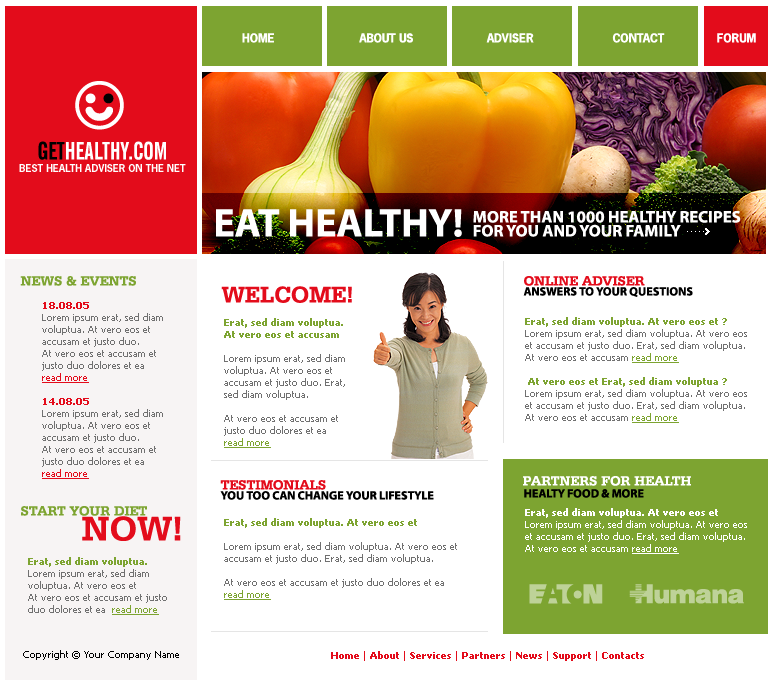
<style>
.page{position:relative;width:775px;height:680px;background:#ffffff}
.page>*{position:absolute;margin:0}
.t1{font:11.5px "NewsGothicStd-Bold";color:#ffffff;text-transform:uppercase}
.t2{font:24px "NewsGothicBT-BoldExtraCondensed";color:#ffffff}
.t3{font:24px "NewsGothicBT-BoldExtraCondensed";color:#000000}
.t4{font:10px "NewsGothicStd-Bold";color:#ffffff;text-transform:uppercase}
.t5{font:40.1px "MyriadPro-Bold";color:#ffffff;text-transform:uppercase}
.t6{font:16.7px "MyriadPro-Bold";color:#ffffff;text-transform:uppercase}
.t7{font:14px "SerifaBT-Bold";color:#7da431;text-transform:uppercase}
.t8{font:14px "SerifaBT-Bold";color:#e30c1b;text-transform:uppercase}
.t9{font:24px "SerifaBT-Bold";color:#e30c1b;text-transform:uppercase}
.t10{font:12px "MyriadPro-Bold";color:#000000;text-transform:uppercase}
.t11{font:10px "Tahoma";color:#707070}
.t12{font:10px "Tahoma-Bold";color:#e30c1b}
.t13{font:10px "Tahoma";color:#e30c1b;text-decoration:underline}
.t14{font:10px "Tahoma-Bold";color:#7da431}
.t15{font:10px "Tahoma";color:#7da431;text-decoration:underline}
.t16{font:14px "SerifaBT-Bold";color:#ffffff;text-transform:uppercase}
.t17{font:10px "Tahoma";color:#ffffff}
.t18{font:10px "Tahoma-Bold";color:#ffffff}
.t19{font:10px "Tahoma";color:#ffffff;text-decoration:underline}
.t20{font:36px "SerifaBT-Bold";color:#e30c1b;text-transform:uppercase}
.t21{font:24px "CORPartIISample";color:#bed298;text-transform:uppercase}
.t22{font:10px "Tahoma";color:#000000}
.t23{font:10px "Tahoma";color:#e30c1b}
</style>
<div class="page">
<p class="t1" style="left:242px;top:33px;width:32px;height:10px">HOME</p>
<p class="t1" style="left:359px;top:33px;width:54px;height:10px">ABOUT US</p>
<p class="t1" style="left:486px;top:33px;width:48px;height:10px">ADVISER</p>
<p class="t1" style="left:612px;top:33px;width:53px;height:10px">CONTACT</p>
<p class="t1" style="left:717px;top:33px;width:39px;height:10px">FORUM</p>
<p class="t2" style="left:38px;top:141px;width:128px;height:19px"><span class="t3">GET</span>HEALTHY.COM</p>
<p class="t4" style="left:19px;top:164px;width:167px;height:8px">BEST HEALTH ADVISER ON THE NET</p>
<p class="t5" style="left:216px;top:209px;width:246px;height:28px">EAT HEALTHY!</p>
<p class="t6" style="left:473px;top:211px;width:268px;height:12px">MORE THAN 1000 HEALTHY RECIPES</p>
<p class="t6" style="left:473px;top:224px;width:208px;height:13px">FOR YOU AND YOUR FAMILY</p>
<p class="t7" style="left:20px;top:276px;width:116px;height:10px">NEWS &amp; EVENTS</p>
<p class="t8" style="left:524px;top:276px;width:121px;height:10px">ONLINE ADVISER</p>
<p class="t9" style="left:221px;top:286px;width:131px;height:17px">WELCOME!</p>
<p class="t10" style="left:523px;top:287px;width:170px;height:10px">ANSWERS TO YOUR QUESTIONS</p>
<p class="t11" style="left:42px;top:302px;width:121px;height:177px"><span class="t12">18.08.05<br></span>Lorem ipsum erat, sed diam voluptua. At vero eos et accusam et justo duo. <br>At vero eos et accusam et justo duo dolores et ea  <span class="t13">read more<br><br></span><span class="t12">14.08.05<br></span>Lorem ipsum erat, sed diam voluptua. At vero eos et accusam et justo duo. <br>At vero eos et accusam et justo duo dolores et ea  <span class="t13">read more</span></p>
<p class="t11" style="left:224px;top:318px;width:121px;height:130px"><span class="t14">Erat, sed diam voluptua. At vero eos et accusam <br><br></span>Lorem ipsum erat, sed diam voluptua. At vero eos et accusam et justo duo. Erat, sed diam voluptua. <br><br>At vero eos et accusam et justo duo dolores et ea  <span class="t15">read more</span></p>
<p class="t11" style="left:525px;top:317px;width:222px;height:106px"><span class="t14">Erat, sed diam voluptua. At vero eos et ?<br></span>Lorem ipsum erat, sed diam voluptua. At vero eos et accusam et justo duo. Erat, sed diam voluptua.<br>At vero eos et accusam <span class="t15">read more<br><br></span><span class="t14"> At vero eos et Erat, sed diam voluptua ?<br></span>Lorem ipsum erat, sed diam voluptua. At vero eos et accusam et justo duo. Erat, sed diam voluptua.<br>At vero eos et accusam <span class="t15">read more</span></p>
<p class="t8" style="left:220px;top:480px;width:106px;height:10px">TESTIMONIALS</p>
<p class="t16" style="left:523px;top:476px;width:168px;height:10px">partners for health</p>
<p class="t10" style="left:220px;top:491px;width:214px;height:9px">YOU TOO CAN CHANGE YOUR LIFESTYLE</p>
<p class="t10" style="left:524px;top:489px;width:120px;height:9px">healty food &amp; more</p>
<p class="t7" style="left:21px;top:506px;width:126px;height:10px">START your diet</p>
<p class="t17" style="left:525px;top:508px;width:222px;height:46px"><span class="t18">Erat, sed diam voluptua. At vero eos et<br></span>Lorem ipsum erat, sed diam voluptua. At vero eos et accusam et justo duo. Erat, sed diam voluptua.<br>At vero eos et accusam <span class="t19">read more</span></p>
<p class="t20" style="left:82px;top:516px;width:99px;height:25px">now!</p>
<p class="t11" style="left:224px;top:518px;width:233px;height:82px"><span class="t14">Erat, sed diam voluptua. At vero eos et <br></span><br>Lorem ipsum erat, sed diam voluptua. At vero eos et accusam et justo duo. Erat, sed diam voluptua. <br><br>At vero eos et accusam et justo duo dolores et ea  <span class="t15">read more</span></p>
<p class="t11" style="left:28px;top:557px;width:139px;height:58px"><span class="t14">Erat, sed diam voluptua. </span>Lorem ipsum erat, sed diam voluptua. At vero eos et <br>At vero eos et accusam et justo duo dolores et ea  <span class="t15">read more</span></p>
<p class="t21" style="left:529px;top:584px;width:215px;height:20px">e  h</p>
<p class="t22" style="left:23px;top:650px;width:156px;height:10px">Copyright © Your Company Name</p>
<p class="t12" style="left:331px;top:651px;width:313px;height:10px"><span class="t23">  </span>Home<span class="t23"> | </span>About <span class="t23">| </span>Services <span class="t23">| </span>Partners <span class="t23">| </span>News <span class="t23">| </span>Support <span class="t23">| </span>Contacts</p>
</div>
